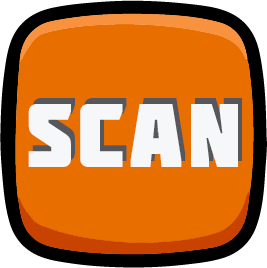
<style>
.page{position:relative;width:267px;height:268px;background:#e86e00}
.page>*{position:absolute;margin:0}
.t1{font:90px "Molot";letter-spacing:0.05em;color:#f6f7f8}
</style>
<div class="page">
<p class="t1" style="left:32px;top:98px;width:210px;height:63px">scan</p>
<p class="t1" style="left:28px;top:104px;width:210px;height:63px">scan</p>
</div>
